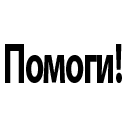
<style>
.page{position:relative;width:128px;height:128px;background:#ffffff}
.page>*{position:absolute;margin:0}
.t1{font:57px "MyriadPro-Bold";letter-spacing:-0.05em;color:#000000;scale:0.6 1}
</style>
<div class="page">
<p class="t1" style="left:5px;top:44px;width:117px;height:39px">Помоги!</p>
</div>
